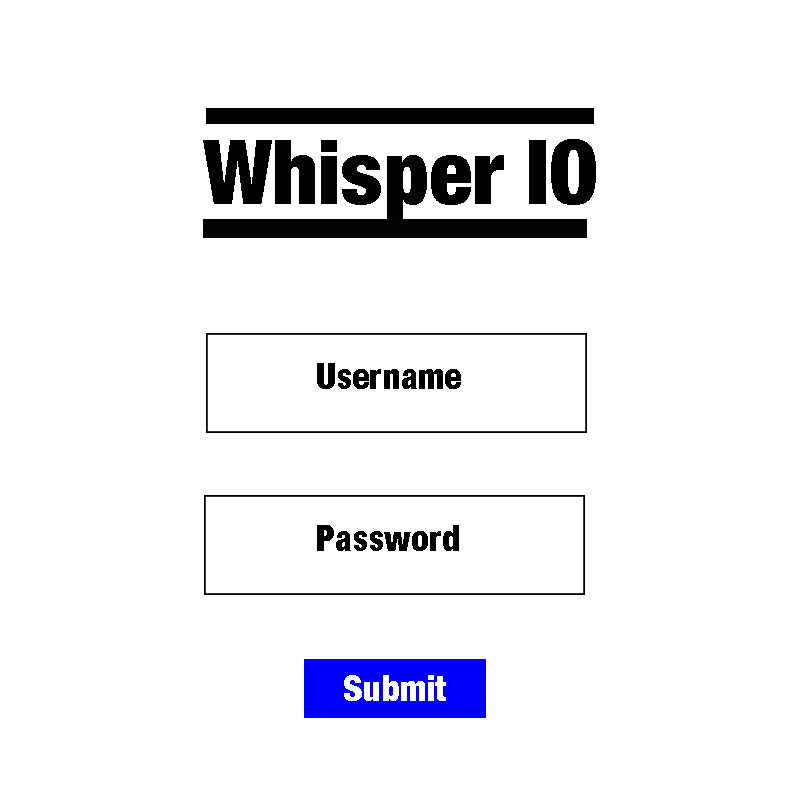
<style>
.page{position:relative;width:800px;height:800px;background:#ffffff}
.page>*{position:absolute;margin:0}
.t1{font:35.6px "HelveticaNeue-CondensedBlack";color:#000000}
.t2{font:35.6px "HelveticaNeue-CondensedBlack";color:#ffffff}
</style>
<div class="page">
<p class="t1" style="left:317px;top:363px;width:144px;height:26px">Username</p>
<p class="t1" style="left:317px;top:525px;width:142px;height:26px">Password</p>
<p class="t2" style="left:344px;top:675px;width:102px;height:26px">Submit</p>
</div>
